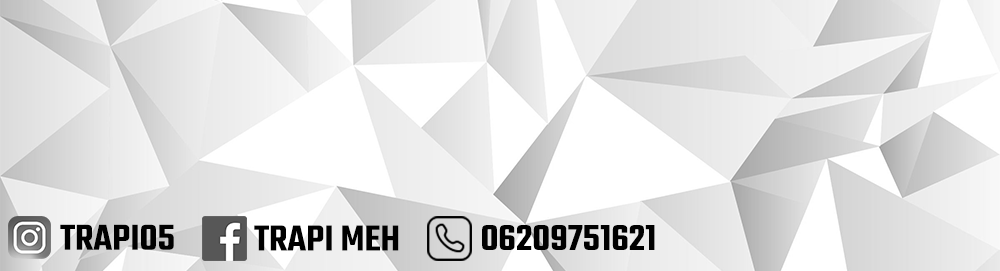
<style>
.page{position:relative;width:1000px;height:271px}
.page>*{position:absolute;margin:0}
.t1{font:39.2px "Teko-SemiBold";color:#000000;text-transform:uppercase}
</style>
<div class="page">
<p class="t1" style="left:60px;top:224px;width:114px;height:26px">trapi05</p>
<p class="t1" style="left:254px;top:225px;width:145px;height:26px">Trapi meh</p>
<p class="t1" style="left:482px;top:225px;width:173px;height:25px">06209751621</p>
</div>
